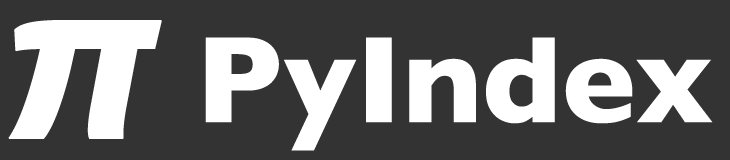
<style>
.page{position:relative;width:730px;height:160px;background:#333333}
.page>*{position:absolute;margin:0}
.t1{font:208.3px "KozGoPro-Heavy";color:#ffffff;font-weight:bold}
.t2{font:125px "GillSans-Bold";color:#ffffff}
</style>
<div class="page">
<p class="t1" style="left:8px;top:20px;width:154px;height:119px">π</p>
<p class="t2" style="left:205px;top:37px;width:508px;height:114px">PyIndex</p>
</div>
